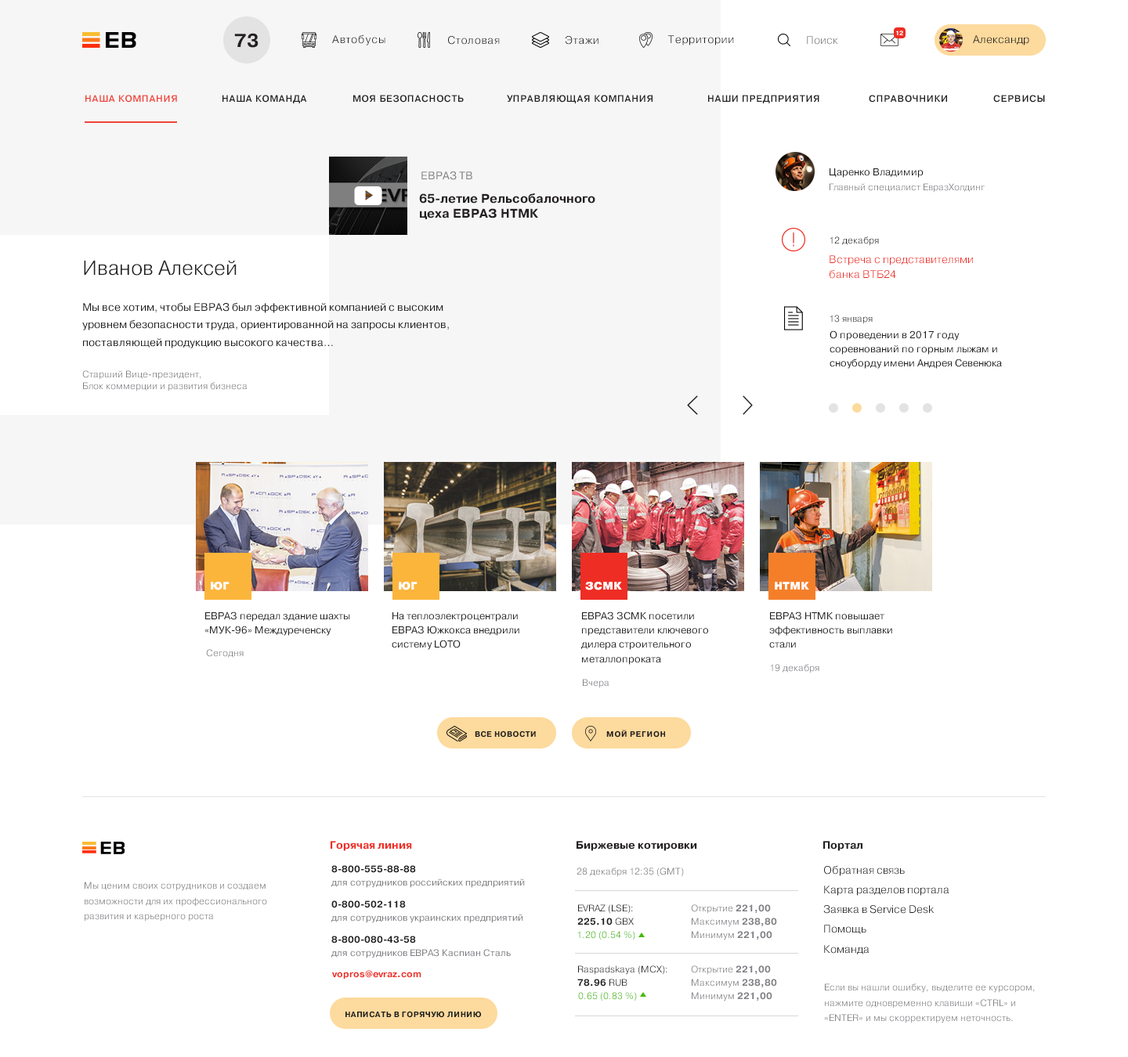
<style>
.page{position:relative;width:1128px;height:1057px;background:#ffffff}
.page>*{position:absolute;margin:0}
.t1{font:18.8px "Pragmatica-Bold";color:#231f20}
.t2{font:11px "Pragmatica-Light";letter-spacing:0.05em;color:#221f1f}
.t3{font:11px "Pragmatica-Light";letter-spacing:0.05em;color:#211f1f}
.t4{font:11px "Pragmatica-Light";color:#818285}
.t5{font:6.3px "Pragmatica-Bold";color:#ffffff}
.t6{font:11px "Pragmatica-Light";color:#231f20}
.t7{font:9.4px "Pragmatica-Medium";letter-spacing:0.05em;color:#f04239}
.t8{font:9.4px "Pragmatica-Medium";letter-spacing:0.05em;color:#1f1f1f}
.t9{font:9.4px "Pragmatica-Medium";letter-spacing:0.05em;color:#211f1f}
.t10{font:9.4px "Pragmatica-Medium";letter-spacing:0.05em;color:#201f1f}
.t11{font:11px "Pragmatica-Book";color:#818285}
.t12{font:10.2px "Pragmatica-Book";color:#1f1f1f}
.t13{font:9.4px "Pragmatica-Light";color:#7f8085}
.t14{font:12.5px/15px "Pragmatica-Bold";color:#231f20}
.t15{font:9.4px "Pragmatica-Light";color:#231f20}
.t16{font:11px/15.4px "Pragmatica-Light";color:#ee2d24}
.t17{font:20.4px "Pragmatica-Light";color:#221f1f}
.t18{font:11px/17.5px "Pragmatica-Book";color:#1f1f1f}
.t19{font:10.2px/14.3px "Pragmatica-Book";color:#1f1f1f}
.t20{font:9.4px/11.3px "Pragmatica-Light";color:#7f8085}
.t21{font:11px "Pragmatica-Black";color:#ffffff}
.t22{font:10.2px/14.3px "Pragmatica-Book";color:#221f1f}
.t23{font:10.2px/14.3px "Pragmatica-Book";color:#201f1f}
.t24{font:7.8px "Pragmatica-Bold";letter-spacing:0.05em;color:#231f20}
.t25{font:7.8px "Pragmatica-Bold";letter-spacing:0.05em;color:#221f1f}
.t26{font:11px "Pragmatica-Bold";color:#ee2d24}
.t27{font:11px "Pragmatica-Bold";color:#231f20}
.t28{font:11px "Pragmatica-Bold";color:#221f1f}
.t29{font:9.4px "Pragmatica-Bold";color:#211f1f}
.t30{font:9.4px "Pragmatica-Light";color:#7f7f85}
.t31{font:11px/19.7px "Pragmatica-Light";color:#221f1f}
.t32{font:9.4px/15px "Pragmatica-Light";color:#7f8085}
.t33{font:9.4px "Pragmatica-Book";color:#818285}
.t34{font:9.4px/13.2px "Pragmatica-Light";color:#211f1f}
.t35{font:9.4px/13.2px "Pragmatica-Bold";color:#211f1f}
.t36{font:9.4px/13.2px "Pragmatica-Light";color:#7f8085}
.t37{font:9.4px/13.2px "Pragmatica-Bold";color:#7f8085}
.t38{font:9.4px "Pragmatica-Book";color:#808185}
.t39{font:9.4px "Pragmatica-Light";color:#46b900}
.t40{font:9.4px/13.2px "Pragmatica-Light";color:#201f1f}
.t41{font:9.4px/13.2px "Pragmatica-Bold";color:#201f1f}
.t42{font:9.4px "Pragmatica-Bold";color:#ee2d24}
.t43{font:9.4px/15px "Pragmatica-Light";color:#808185}
.t44{font:9.4px "Pragmatica-Light"}
.t45{font:7.8px "Pragmatica-Bold";letter-spacing:0.05em;color:#1f1f1f}
</style>
<div class="page">
<p class="t1" style="left:234px;top:33px;width:24px;height:15px">73</p>
<p class="t2" style="left:332px;top:34px;width:53px;height:11px">Автобусы</p>
<p class="t3" style="left:448px;top:36px;width:52px;height:9px">Столовая</p>
<p class="t3" style="left:565px;top:36px;width:33px;height:9px">Этажи</p>
<p class="t3" style="left:668px;top:35px;width:66px;height:10px">Территории</p>
<p class="t4" style="left:807px;top:36px;width:31px;height:9px">Поиск</p>
<p class="t5" style="left:896px;top:31px;width:7px;height:4px">12</p>
<p class="t6" style="left:973px;top:35px;width:56px;height:10px">Александр</p>
<p class="t7" style="left:85px;top:95px;width:92px;height:8px">НАША КОМПАНИЯ</p>
<p class="t8" style="left:222px;top:95px;width:85px;height:8px">НАША КОМАНДА</p>
<p class="t8" style="left:353px;top:95px;width:111px;height:8px">МОЯ БЕЗОПАCНОСТЬ</p>
<p class="t9" style="left:507px;top:95px;width:145px;height:8px">УПРАВЛЯЮЩАЯ КОМПАНИЯ</p>
<p class="t9" style="left:708px;top:95px;width:111px;height:8px">НАШИ ПРЕДПРИЯТИЯ</p>
<p class="t10" style="left:869px;top:95px;width:78px;height:8px">СПРАВОЧНИКИ</p>
<p class="t10" style="left:993px;top:95px;width:52px;height:8px">СЕРВИСЫ</p>
<p class="t11" style="left:421px;top:172px;width:51px;height:8px">ЕВРАЗ ТВ</p>
<p class="t12" style="left:829px;top:168px;width:94px;height:10px">Царенко Владимир</p>
<p class="t13" style="left:829px;top:183px;width:155px;height:10px">Главный специалист ЕвразХолдинг</p>
<p class="t14" style="left:419px;top:193px;width:176px;height:26px">65-летие Рельсобалочного цеха ЕВРАЗ НТМК</p>
<p class="t15" style="left:829px;top:237px;width:50px;height:9px">12 декабря</p>
<p class="t16" style="left:829px;top:255px;width:144px;height:24px">Встреча с представителями банка ВТБ24</p>
<p class="t17" style="left:84px;top:260px;width:153px;height:16px">Иванов Алексей</p>
<p class="t18" style="left:82px;top:302px;width:367px;height:47px">Мы все хотим, чтобы ЕВРАЗ был эффективной компанией с высоким уровнем безопасности труда, ориентированной на запросы клиентов, поставляющей продукцию высокого качества…</p>
<p class="t15" style="left:829px;top:315px;width:43px;height:9px">13 января</p>
<p class="t19" style="left:829px;top:331px;width:173px;height:38px">О проведении в 2017 году соревнований по горным лыжам и сноуборду имени Андрея Севенюка</p>
<p class="t20" style="left:82px;top:370px;width:165px;height:22px">Старший Вице-президент,<br>Блок коммерции и развития бизнеса</p>
<p class="t21" style="left:211px;top:582px;width:18px;height:9px">ЮГ</p>
<p class="t21" style="left:399px;top:582px;width:18px;height:9px">ЮГ</p>
<p class="t21" style="left:585px;top:582px;width:37px;height:9px">ЗСМК</p>
<p class="t21" style="left:775px;top:582px;width:34px;height:8px">НТМК</p>
<p class="t22" style="left:204px;top:612px;width:146px;height:24px">ЕВРАЗ передал здание шахты «МУК-96» Междуреченску</p>
<p class="t22" style="left:392px;top:612px;width:127px;height:38px">На теплоэлектроцентрали ЕВРАЗ Южкокса внедрили систему LOTO</p>
<p class="t23" style="left:581px;top:612px;width:127px;height:53px">ЕВРАЗ ЗСМК посетили представители ключевого дилера строительного металлопроката</p>
<p class="t23" style="left:769px;top:612px;width:123px;height:36px">ЕВРАЗ НТМК повышает эффективность выплавки стали</p>
<p class="t13" style="left:206px;top:649px;width:38px;height:9px">Сегодня</p>
<p class="t13" style="left:770px;top:664px;width:49px;height:10px">19 декабря</p>
<p class="t13" style="left:583px;top:679px;width:26px;height:9px">Вчера</p>
<p class="t24" style="left:475px;top:731px;width:61px;height:7px">ВСЕ НОВОСТИ</p>
<p class="t25" style="left:606px;top:730px;width:59px;height:8px">МОЙ РЕГИОН</p>
<p class="t26" style="left:331px;top:841px;width:81px;height:10px">Горячая линия</p>
<p class="t27" style="left:576px;top:841px;width:121px;height:10px">Биржевые котировки</p>
<p class="t28" style="left:823px;top:841px;width:39px;height:10px">Портал</p>
<p class="t29" style="left:331px;top:865px;width:85px;height:8px">8-800-555-88-88</p>
<p class="t30" style="left:576px;top:868px;width:108px;height:9px">28 декабря 12:35 (GMT)</p>
<p class="t31" style="left:823px;top:865px;width:126px;height:90px">Обратная связь<br>Карта разделов портала<br>Заявка в Service Desk<br>Помощь<br>Команда</p>
<p class="t32" style="left:85px;top:882px;width:182px;height:40px">Мы ценим своих сотрудников и создаем  возможности для их профессионального развития и карьерного роста</p>
<p class="t33" style="left:331px;top:879px;width:194px;height:9px">для сотрудников российских предприятий</p>
<p class="t29" style="left:331px;top:901px;width:75px;height:8px">0-800-502-118</p>
<p class="t34" style="left:577px;top:905px;width:57px;height:21px">EVRAZ (LSE):<br><span class="t35">225.10</span> GBX</p>
<p class="t36" style="left:691px;top:905px;width:86px;height:36px">Открытие <span class="t37">221,00<br></span>Максимум <span class="t37">238,80<br></span>Минимум <span class="t37">221,00</span></p>
<p class="t38" style="left:331px;top:914px;width:192px;height:9px">для сотрудников украинских предприятий</p>
<p class="t29" style="left:331px;top:936px;width:85px;height:8px">8-800-080-43-58</p>
<p class="t39" style="left:577px;top:931px;width:58px;height:10px">1.20 (0.54 %)</p>
<p class="t38" style="left:331px;top:949px;width:180px;height:10px">для сотрудников ЕВРАЗ Каспиан Сталь</p>
<p class="t40" style="left:577px;top:966px;width:90px;height:21px">Raspadskaya (MCX):<br><span class="t41">78.96</span> RUB</p>
<p class="t36" style="left:691px;top:966px;width:86px;height:36px">Открытие <span class="t37">221,00<br></span>Максимум <span class="t37">238,80<br></span>Минимум <span class="t37">221,00</span></p>
<p class="t42" style="left:332px;top:970px;width:89px;height:10px">vopros@evraz.com</p>
<p class="t43" style="left:824px;top:984px;width:211px;height:40px">Если вы нашли ошибку, выделите ее курсором, нажмите одновременно клавиши «CTRL» и «ENTER» и мы скорректируем неточность.</p>
<p class="t44" style="left:578px;top:992px;width:59px;height:10px">0.65 (0.83 %)</p>
<p class="t45" style="left:345px;top:1011px;width:136px;height:7px">НАПИСАТЬ В ГОРЯЧУЮ ЛИНИЮ</p>
</div>
